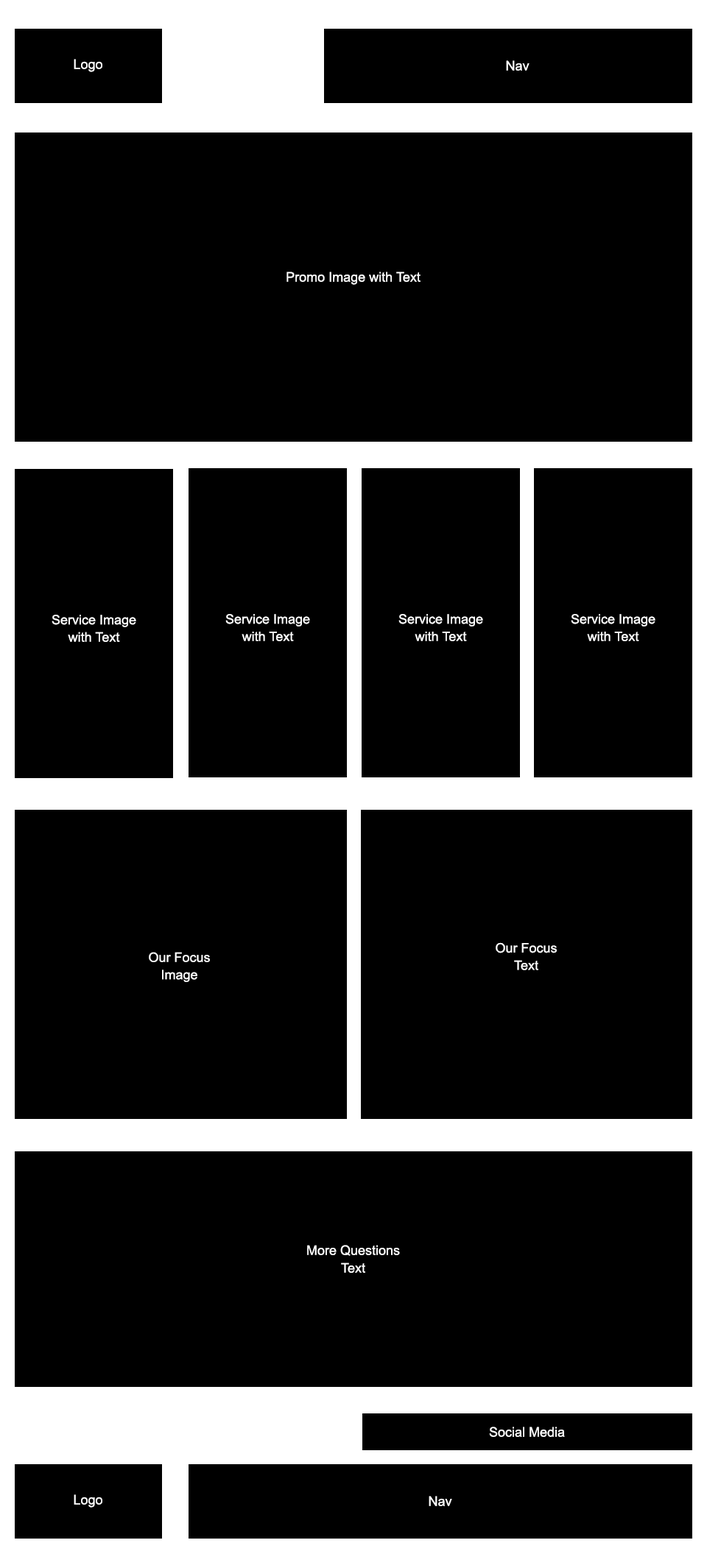
<style>
.page{position:relative;width:707px;height:1568px;background:#000000}
.page>*{position:absolute;margin:0}
.t1{font:13.3px "ArialMT";color:#ffffff}
.t2{font:13px/17.4px "ArialMT";color:#ffffff}
.t3{font:13px/17.3px "ArialMT";color:#ffffff}
.t4{font:13.3px/17.7px "ArialMT";color:#ffffff}
</style>
<div class="page">
<p class="t1" style="left:74px;top:59px;width:28px;height:13px">Logo</p>
<p class="t1" style="left:506px;top:60px;width:23px;height:11px">Nav</p>
<p class="t1" style="left:286px;top:272px;width:134px;height:13px">Promo Image with Text</p>
<p class="t2" style="left:52px;top:615px;width:84px;height:27px;text-align:center">Service Image<br>with Text</p>
<p class="t2" style="left:225px;top:614px;width:85px;height:27px;text-align:center">Service Image<br>with Text</p>
<p class="t2" style="left:398px;top:614px;width:85px;height:27px;text-align:center">Service Image<br>with Text</p>
<p class="t2" style="left:571px;top:614px;width:84px;height:27px;text-align:center">Service Image<br>with Text</p>
<p class="t3" style="left:149px;top:952px;width:61px;height:30px;text-align:center">Our Focus<br>Image</p>
<p class="t3" style="left:495px;top:942px;width:62px;height:28px;text-align:center">Our Focus<br>Text</p>
<p class="t4" style="left:307px;top:1245px;width:93px;height:28px;text-align:center">More Questions<br>Text</p>
<p class="t1" style="left:489px;top:1427px;width:76px;height:10px">Social Media</p>
<p class="t1" style="left:74px;top:1494px;width:28px;height:14px">Logo</p>
<p class="t1" style="left:428px;top:1496px;width:24px;height:10px">Nav</p>
</div>
